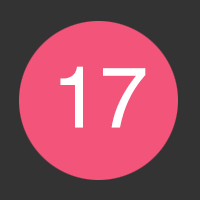
<style>
.page{position:relative;width:200px;height:200px;background:#333333}
.page>*{position:absolute;margin:0}
.t1{font:86.1px "FZHTJW--GB1-0";color:#ffffff}
</style>
<div class="page">
<p class="t1" style="left:60px;top:66px;width:86px;height:62px">17</p>
</div>
